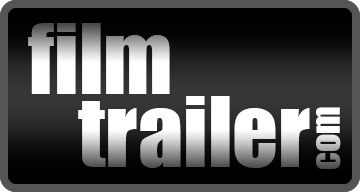
<style>
.page{position:relative;width:360px;height:192px}
.page>*{position:absolute;margin:0}
.t1{font:90px "Impact"}
.t2{font:36px "Impact"}
</style>
<div class="page">
<p class="t1" style="left:28px;top:23px;width:142px;height:71px">film</p>
<p class="t1" style="left:78px;top:96px;width:232px;height:72px">trailer</p>
<p class="t2" style="left:316px;top:107px;width:25px;height:62px;rotate:-90deg">com</p>
</div>
